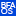
<style>
.page{position:relative;width:16px;height:16px;background:#0045da}
.page>*{position:absolute;margin:0}
.t1{font:7.5px "Comfortaa-Bold";color:#ffffff}
</style>
<div class="page">
<p class="t1" style="left:1px;top:2px;width:15px;height:6px">BFA</p>
<p class="t1" style="left:1px;top:8px;width:12px;height:6px">OS</p>
</div>
